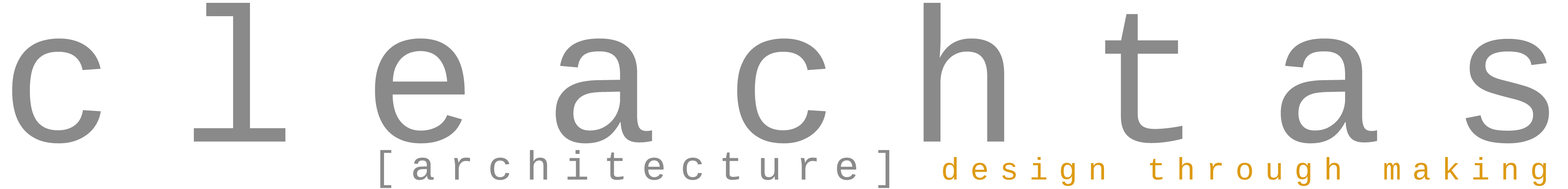
<style>
.page{position:relative;width:1568px;height:189px;background:#ffffff}
.page>*{position:absolute;margin:0}
.t1{font:190.8px "Cousine";letter-spacing:0.35em;color:#8a8a8a}
.t2{font:31px "Cousine";letter-spacing:0.35em;color:#dd9a14}
.t3{font:40.5px "Cousine";letter-spacing:0.35em;color:#8a8a8a}
</style>
<div class="page">
<p class="t1" style="left:12px;top:3px;width:1537px;height:140px">cleachtas</p>
<p class="t2" style="left:380px;top:149px;width:1166px;height:39px"><span class="t3">[architecture] </span>design through making</p>
</div>
